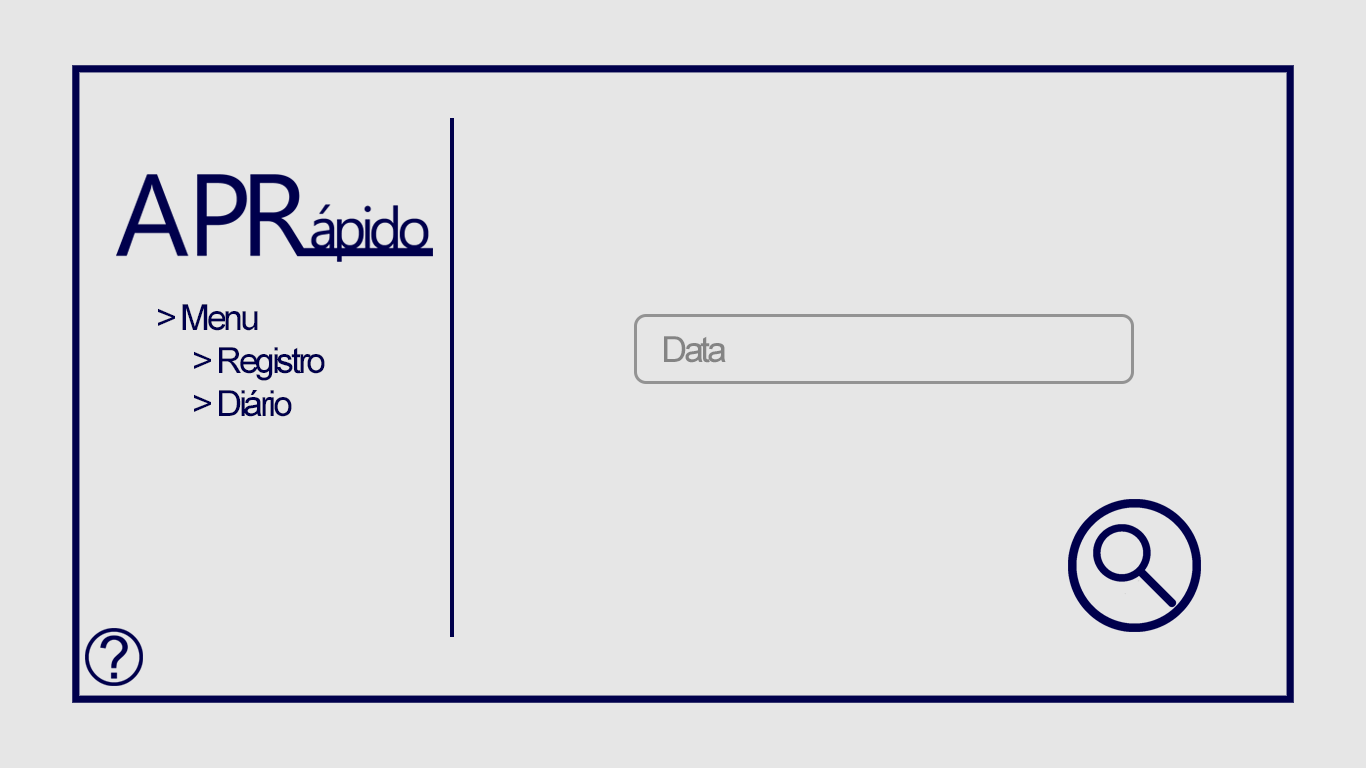
<style>
.page{position:relative;width:1366px;height:768px;background:#e6e6e6}
.page>*{position:absolute;margin:0}
.t1{font:36px "ArialMT";letter-spacing:-0.095em;color:#00004c}
.t2{font:36px "ArialMT";letter-spacing:-0.095em;color:#848484}
</style>
<div class="page">
<p class="t1" style="left:158px;top:304px;width:167px;height:113px">&gt; Menu<br> &gt; Registro <br> &gt; Diário</p>
<p class="t2" style="left:664px;top:336px;width:62px;height:27px">Data</p>
</div>
